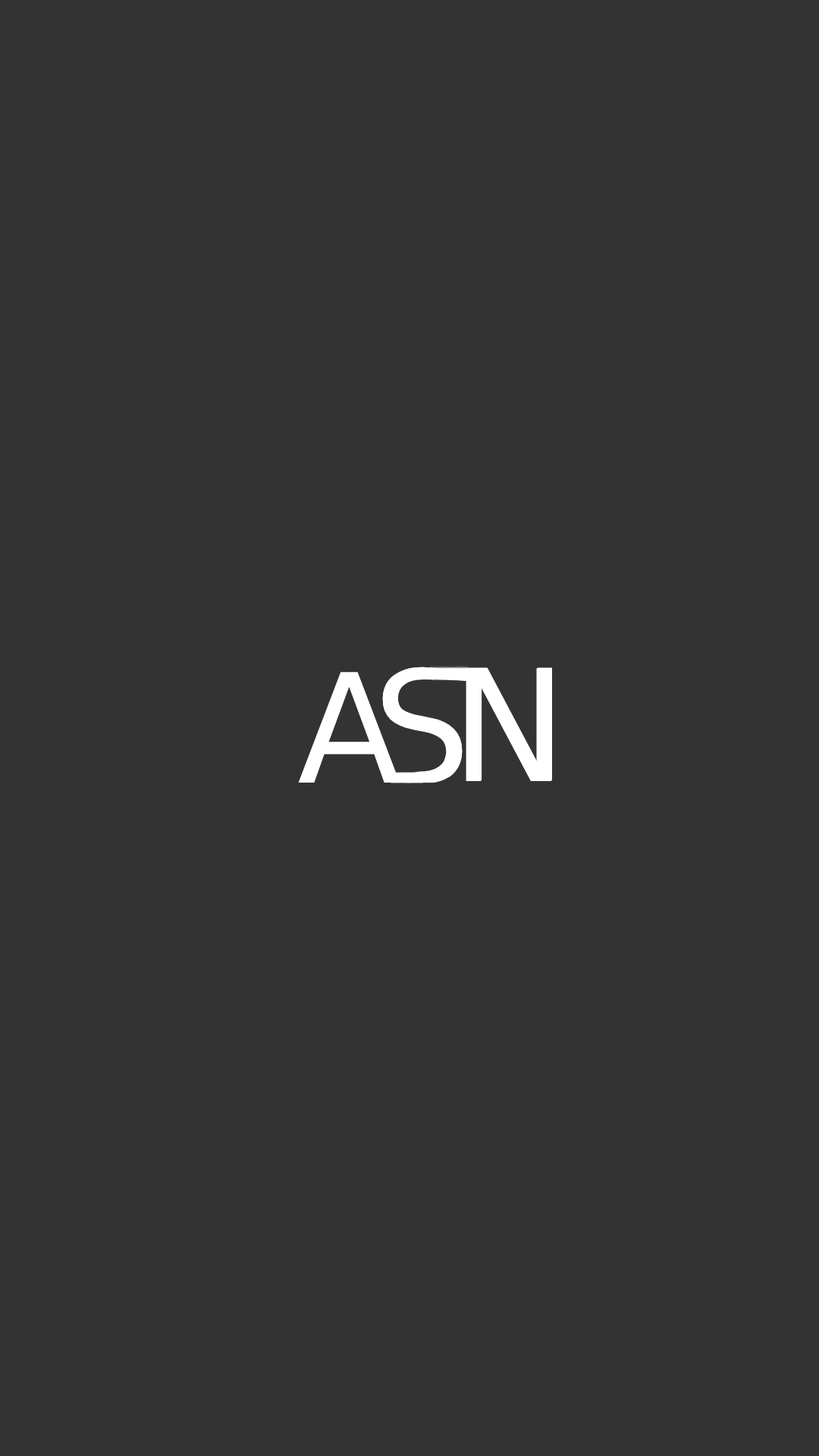
<style>
.page{position:relative;width:819px;height:1456px;background:#333333}
.page>*{position:absolute;margin:0}
.t1{font:151.7px "DejaVuSans";color:#ffffff}
.t2{font:154.4px "DejaVuSans";color:#ffffff}
</style>
<div class="page">
<p class="t1" style="left:298px;top:672px;width:102px;height:111px">A</p>
<p class="t2" style="left:466px;top:668px;width:85px;height:113px">N</p>
</div>
